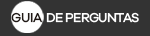
<style>
.page{position:relative;width:150px;height:36px;background:#333333}
.page>*{position:absolute;margin:0}
.t1{font:13.2px "GalanoGrotesque-Medium";letter-spacing:-0.05em;color:#211915;text-transform:uppercase}
.t2{font:13.2px "GalanoGrotesque-Medium";letter-spacing:-0.05em;color:#ffffff;text-transform:uppercase}
</style>
<div class="page">
<p class="t1" style="left:11px;top:12px;width:32px;height:11px">GUIA</p>
<p class="t2" style="left:46px;top:12px;width:93px;height:11px">DE PERGUNTAS</p>
</div>
